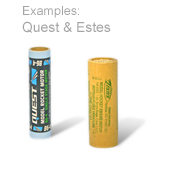
<style>
.page{position:relative;width:175px;height:170px;background:#ffffff}
.page>*{position:absolute;margin:0}
.t1{font:13.9px "ArialMT";color:#a6a5a5}
.t2{font:12.5px "ArialMT";color:#a6a5a5}
</style>
<div class="page">
<p class="t1" style="left:22px;top:6px;width:89px;height:27px"><span class="t2">Examples:<br></span>Quest &amp; Estes</p>
</div>
